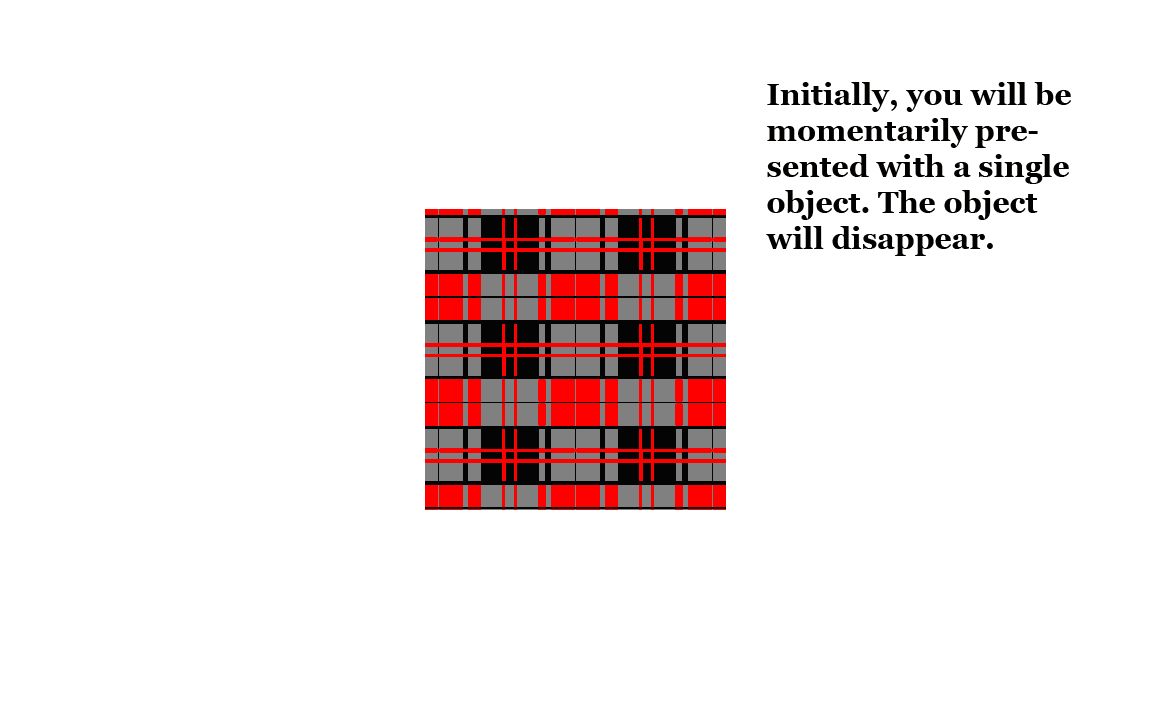
<style>
.page{position:relative;width:1152px;height:720px;background:#ffffff}
.page>*{position:absolute;margin:0}
.t1{font:30px "Georgia-Bold";color:#020100}
</style>
<div class="page">
<p class="t1" style="left:766px;top:82px;width:305px;height:174px">Initially, you will be momentarily presented with a single object. The object will disappear.</p>
</div>
